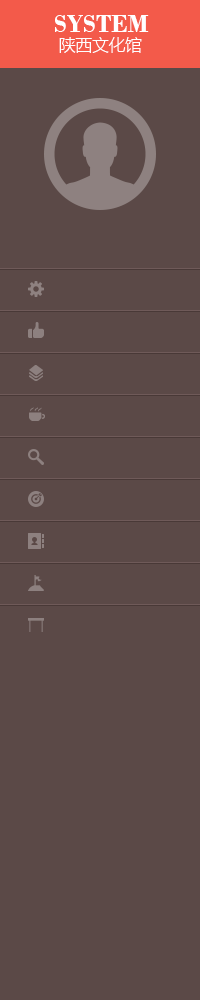
<style>
.page{position:relative;width:200px;height:1000px;background:#5b4947}
.page>*{position:absolute;margin:0}
.t1{font:25.7px "BodoniMT-Bold";color:#ffffff;text-transform:uppercase}
.t2{font:16.5px "MicrosoftYaHeiLight";color:#ffffff;text-transform:uppercase}
</style>
<div class="page">
<p class="t1" style="left:55px;top:15px;width:94px;height:17px">SYSTEM</p>
<p class="t2" style="left:59px;top:37px;width:83px;height:16px">陕西文化馆</p>
</div>
